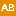
<style>
.page{position:relative;width:16px;height:16px;background:#e58c00}
.page>*{position:absolute;margin:0}
.t1{font:10px "Montserrat-Bold";color:#ffffff}
</style>
<div class="page">
<p class="t1" style="left:1px;top:4px;width:13px;height:7px">AB</p>
</div>
